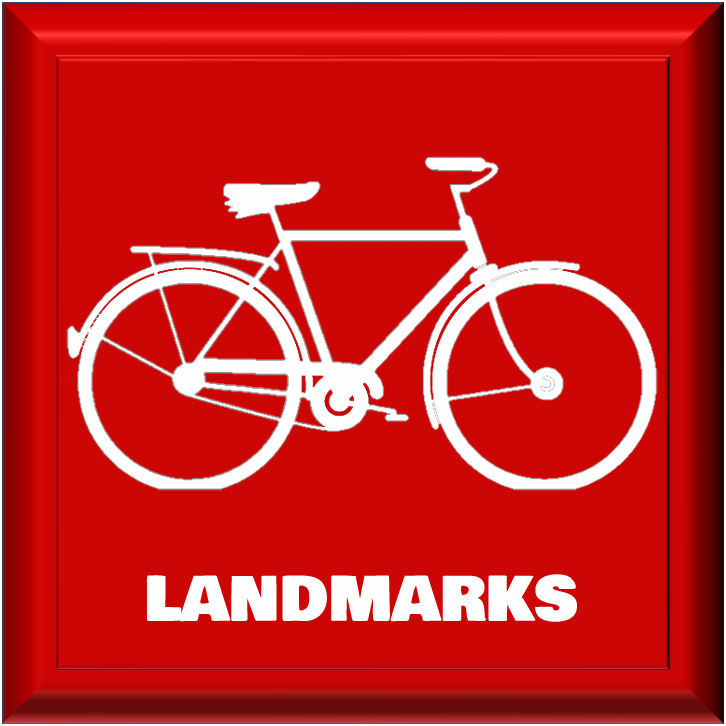
<style>
.page{position:relative;width:726px;height:726px;background:#cc0505}
.page>*{position:absolute;margin:0}
.t1{font:60px "BowlbyOneSC-Regular";color:#fefefe}
</style>
<div class="page">
<p class="t1" style="left:146px;top:574px;width:431px;height:48px">LANDMARKS</p>
</div>
